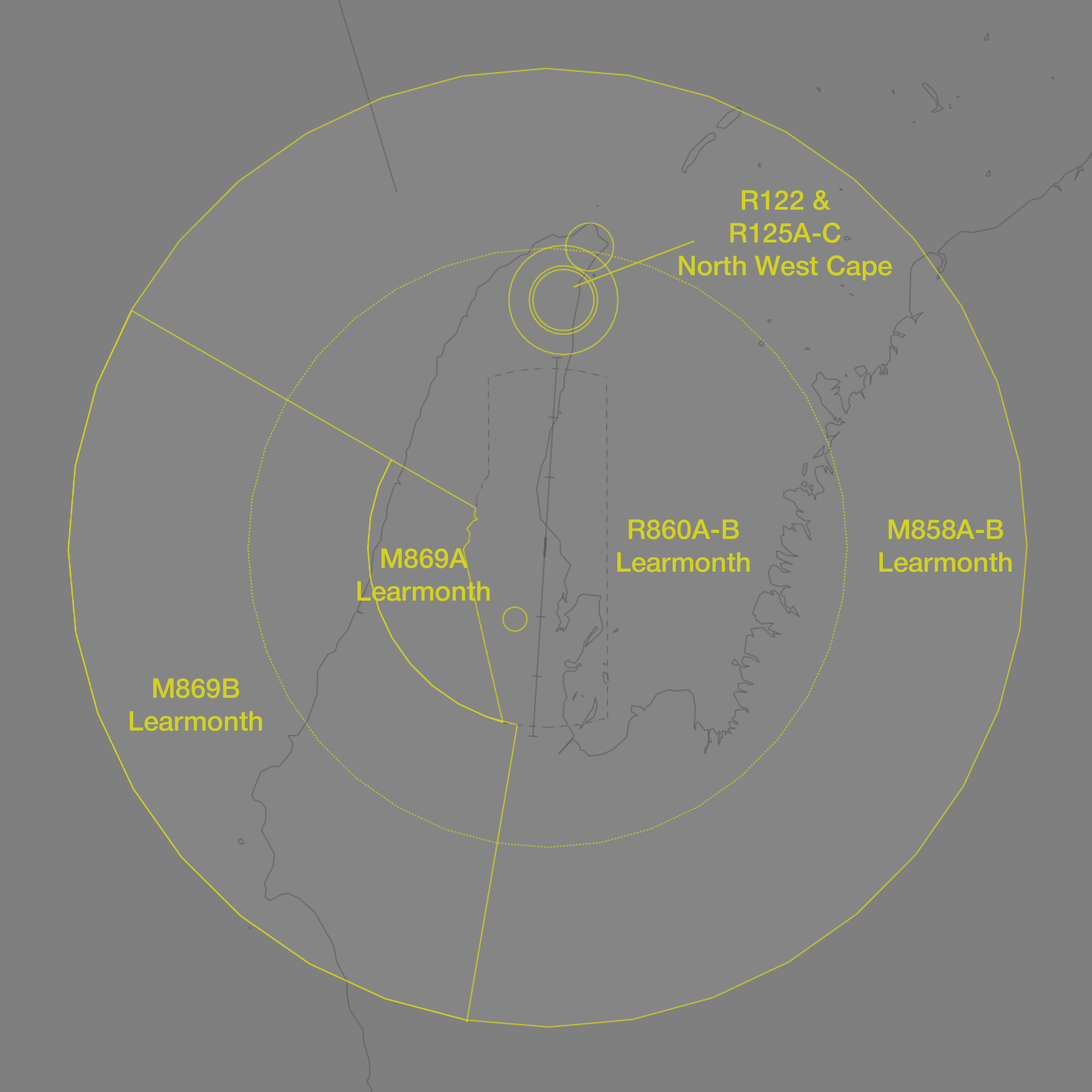
<style>
.page{position:relative;width:1092px;height:1092px;background:#858585}
.page>*{position:absolute;margin:0}
.t1{font:27.3px "HelveticaNeue-Medium";color:#d2d21e}
</style>
<div class="page">
<p class="t1" style="left:679px;top:190px;width:213px;height:91px;text-align:center">R122 &amp;<br>R125A-C<br>North West Cape</p>
<p class="t1" style="left:617px;top:519px;width:133px;height:53px;text-align:center">R860A-B<br>Learmonth</p>
<p class="t1" style="left:879px;top:519px;width:133px;height:53px;text-align:center">M858A-B<br>Learmonth</p>
<p class="t1" style="left:357px;top:548px;width:133px;height:53px;text-align:center">M869A<br>Learmonth</p>
<p class="t1" style="left:129px;top:678px;width:133px;height:53px;text-align:center">M869B<br>Learmonth</p>
</div>
